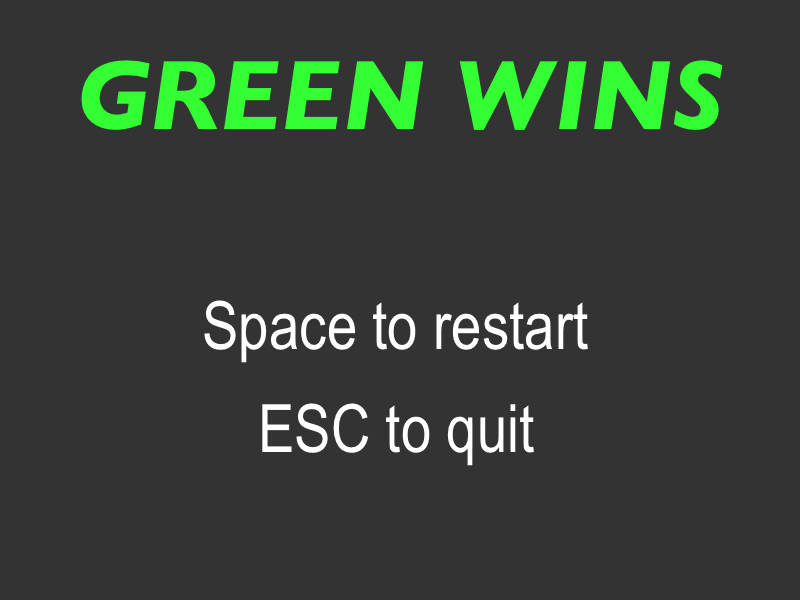
<style>
.page{position:relative;width:800px;height:600px;background:#333333}
.page>*{position:absolute;margin:0}
.t1{font:100px "GillSans-BoldItalic";color:#33ff33}
.t2{font:66.7px "ArialNarrow";color:#ffffff}
</style>
<div class="page">
<p class="t1" style="left:81px;top:60px;width:642px;height:70px">GREEN WINS</p>
<p class="t2" style="left:204px;top:300px;width:384px;height:63px">Space to restart</p>
<p class="t2" style="left:262px;top:403px;width:272px;height:63px">ESC to quit</p>
</div>
